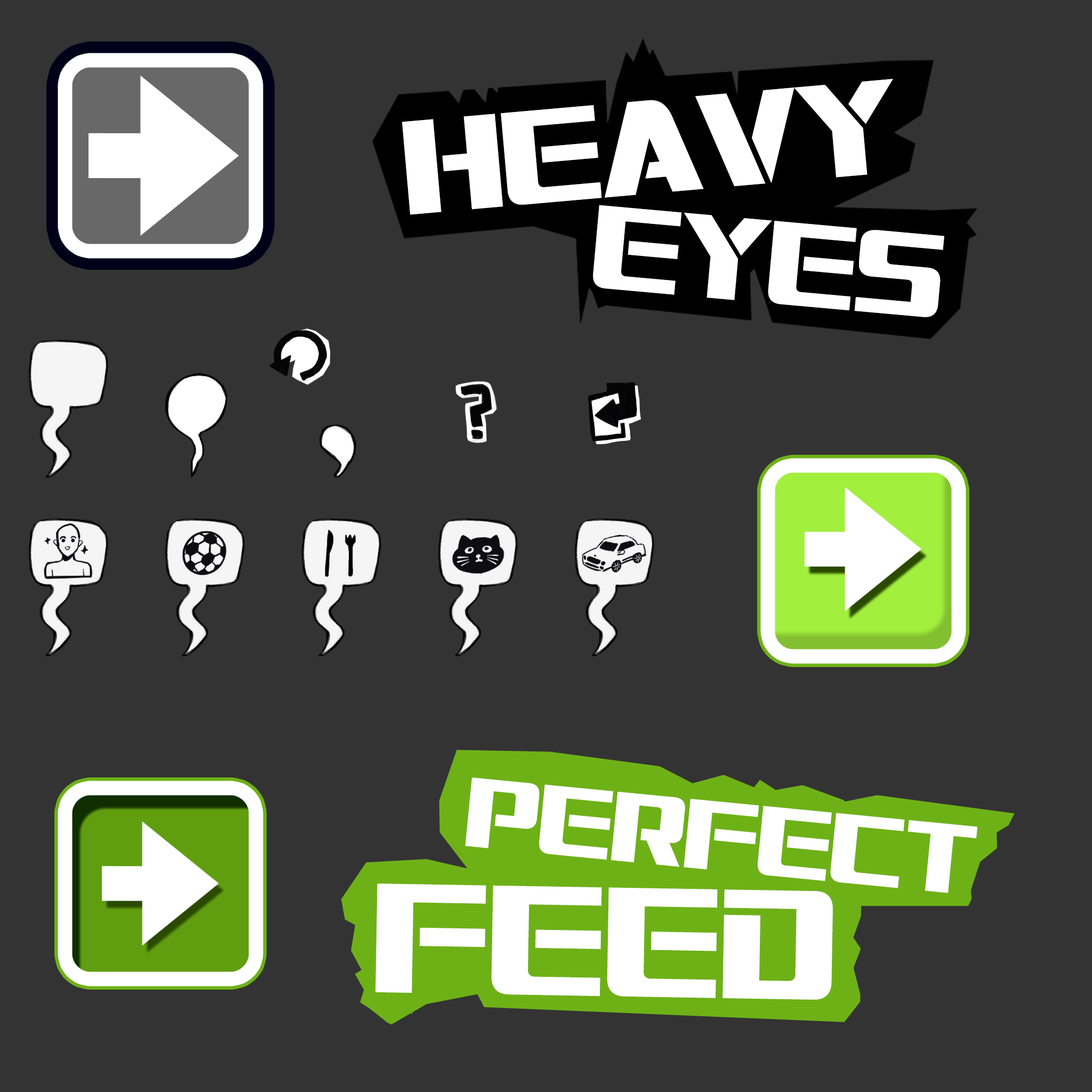
<style>
.page{position:relative;width:1092px;height:1092px;background:#333333}
.page>*{position:absolute;margin:0}
.t1{font:126.9px "Interceptor";color:#ffffff}
.t2{font:112.5px "Interceptor";color:#ffffff}
.t3{font:93.7px "Interceptor";color:#ffffff}
.t4{font:148.1px "Interceptor";color:#ffffff}
</style>
<div class="page">
<p class="t1" style="left:402px;top:79px;width:491px;height:136px;rotate:-5deg">HEAVY</p>
<p class="t2" style="left:593px;top:205px;width:351px;height:112px;rotate:5deg">EYES</p>
<p class="t3" style="left:465px;top:777px;width:512px;height:116px;rotate:6deg">PERFECT</p>
<p class="t4" style="left:375px;top:884px;width:458px;height:116px;rotate:1deg">FEED</p>
</div>
